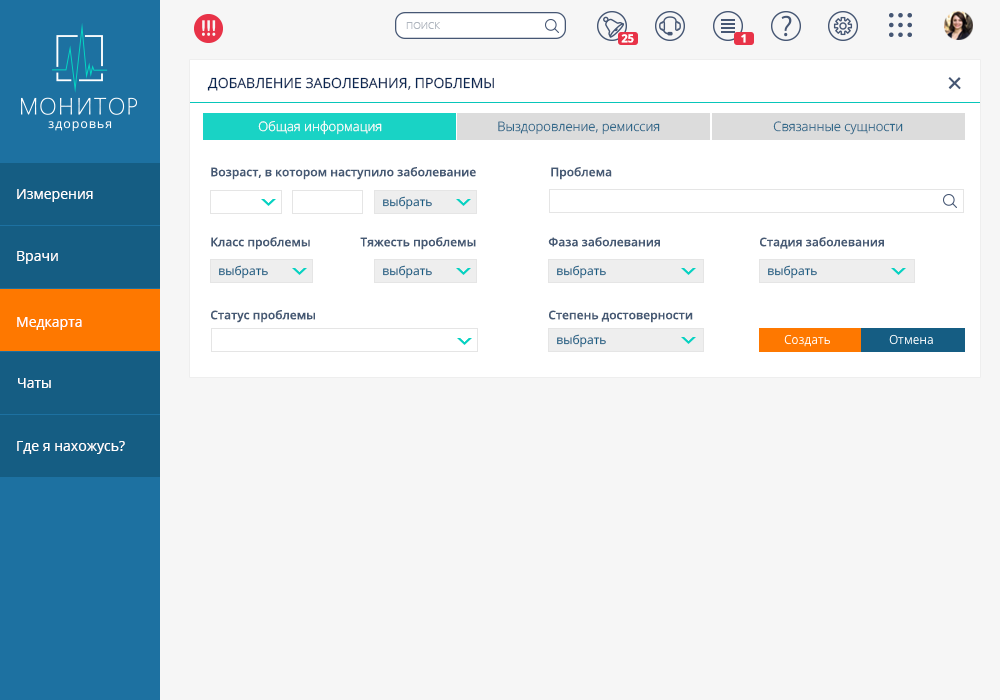
<style>
.page{position:relative;width:1000px;height:700px;background:#f6f6f6}
.page>*{position:absolute;margin:0}
.t1{font:10px "OpenSans-Light";color:#aeb5be;text-transform:uppercase}
.t2{font:11px "OpenSans-Bold";color:#ffffff}
.t3{font:14px "OpenSans";color:#082551;text-transform:uppercase}
.t4{font:13px "OpenSans-Light";color:#ffffff}
.t5{font:13px "OpenSans-Light";color:#155d83}
.t6{font:12px "OpenSans-Semibold";color:#455974}
.t7{font:14px "OpenSans";color:#ffffff}
.t8{font:12px "OpenSans";color:#155d83}
.t9{font:12px "OpenSans";color:#ffffff}
.t10{font:12px "OpenSans"}
</style>
<div class="page">
<p class="t1" style="left:406px;top:22px;width:34px;height:7px">поиск</p>
<p class="t2" style="left:621px;top:34px;width:13px;height:9px">25</p>
<p class="t2" style="left:741px;top:34px;width:5px;height:9px">1</p>
<p class="t3" style="left:207px;top:77px;width:287px;height:14px">Добавление заболевания, проблемы</p>
<p class="t4" style="left:258px;top:120px;width:124px;height:15px">Общая информация</p>
<p class="t5" style="left:498px;top:121px;width:162px;height:14px">Выздоровление, ремиссия</p>
<p class="t5" style="left:773px;top:121px;width:130px;height:14px">Связанные сущности</p>
<p class="t6" style="left:211px;top:167px;width:265px;height:13px">Возраст, в котором наступило заболевание</p>
<p class="t6" style="left:551px;top:167px;width:61px;height:13px">Проблема</p>
<p class="t7" style="left:17px;top:189px;width:76px;height:13px">Измерения</p>
<p class="t8" style="left:383px;top:196px;width:49px;height:14px">выбрать</p>
<p class="t6" style="left:211px;top:237px;width:99px;height:13px">Класс проблемы</p>
<p class="t6" style="left:360px;top:237px;width:116px;height:13px">Тяжесть проблемы</p>
<p class="t6" style="left:548px;top:237px;width:112px;height:10px">Фаза заболевания</p>
<p class="t6" style="left:760px;top:237px;width:124px;height:12px">Стадия заболевания</p>
<p class="t7" style="left:17px;top:251px;width:41px;height:13px">Врачи</p>
<p class="t8" style="left:219px;top:265px;width:49px;height:14px">выбрать</p>
<p class="t8" style="left:383px;top:265px;width:49px;height:14px">выбрать</p>
<p class="t8" style="left:557px;top:265px;width:49px;height:14px">выбрать</p>
<p class="t8" style="left:768px;top:265px;width:49px;height:14px">выбрать</p>
<p class="t7" style="left:17px;top:317px;width:65px;height:13px">Медкарта</p>
<p class="t6" style="left:211px;top:310px;width:104px;height:13px">Статус проблемы</p>
<p class="t6" style="left:549px;top:310px;width:144px;height:13px">Степень достоверности</p>
<p class="t8" style="left:557px;top:334px;width:49px;height:14px">выбрать</p>
<p class="t9" style="left:784px;top:334px;width:46px;height:13px">Создать</p>
<p class="t10" style="left:889px;top:334px;width:44px;height:11px">Отмена</p>
<p class="t7" style="left:18px;top:378px;width:33px;height:10px">Чаты</p>
<p class="t7" style="left:17px;top:441px;width:108px;height:13px">Где я нахожусь?</p>
</div>
